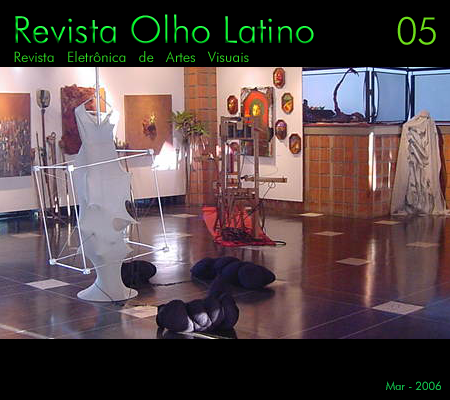
<style>
.page{position:relative;width:450px;height:400px;background:#000000}
.page>*{position:absolute;margin:0}
.t1{font:37.5px "FuturaBT-Light"}
.t2{font:37.5px "FuturaBT-Light";color:#6dde1a}
.t3{font:14.4px "FuturaBT-Light";color:#30df23}
.t4{font:11.4px "FuturaBT-Light";color:#11b748}
</style>
<div class="page">
<p class="t1" style="left:15px;top:14px;width:299px;height:30px">Revista Olho Latino</p>
<p class="t2" style="left:397px;top:16px;width:39px;height:29px">05</p>
<p class="t3" style="left:14px;top:51px;width:235px;height:11px">Revista   Eletrônica   de   Artes   Visuais</p>
<p class="t4" style="left:386px;top:381px;width:55px;height:9px">Mar - 2006</p>
</div>
